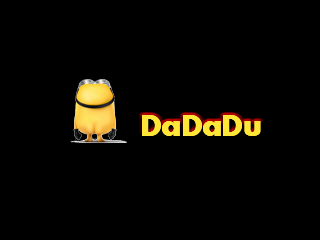
<style>
.page{position:relative;width:320px;height:240px;background:#000000}
.page>*{position:absolute;margin:0}
.t1{font:32px "Aharoni-Bold";letter-spacing:-0.02em;color:#ffe637}
</style>
<div class="page">
<p class="t1" style="left:142px;top:115px;width:119px;height:21px">DaDaDu</p>
</div>
